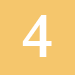
<style>
.page{position:relative;width:75px;height:75px;background:#f5c66c}
.page>*{position:absolute;margin:0}
.t1{font:60px "TimesNewRomanPSMT";color:#ffffff;font-weight:bold}
</style>
<div class="page">
<p class="t1" style="left:22px;top:15px;width:30px;height:42px">4</p>
</div>
